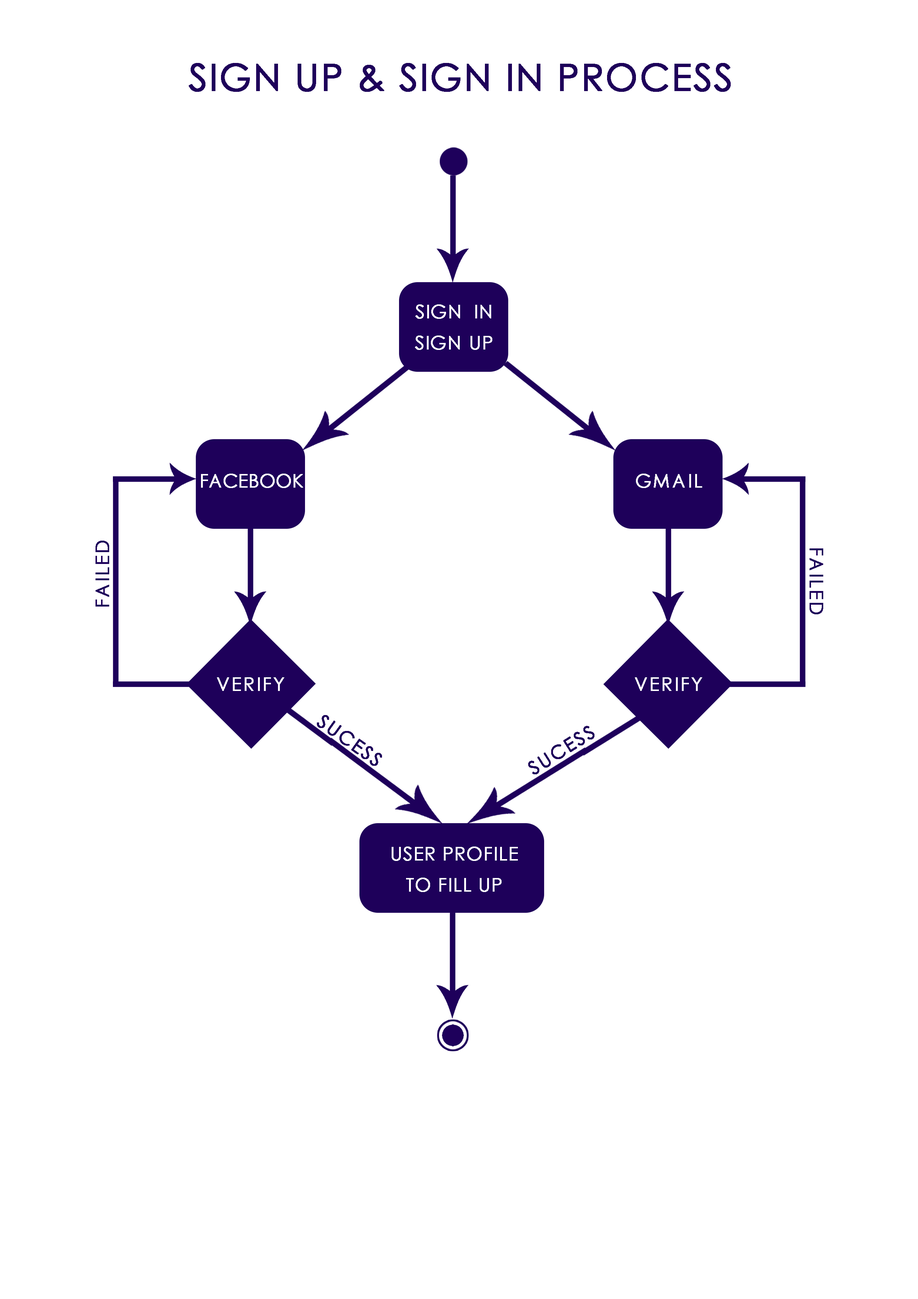
<style>
.page{position:relative;width:918px;height:1299px;background:#ffffff}
.page>*{position:absolute;margin:0}
.t1{font:37px "CenturyGothic";letter-spacing:0.025em;color:#1e005a;text-transform:uppercase;font-weight:bold}
.t2{font:18.5px/30.9px "CenturyGothic";letter-spacing:0.025em;color:#ffffff;text-transform:uppercase;font-weight:bold}
.t3{font:18.5px "CenturyGothic";letter-spacing:-0.01em;color:#ffffff;text-transform:uppercase;font-weight:bold}
.t4{font:18.5px "CenturyGothic";letter-spacing:0.075em;color:#ffffff;text-transform:uppercase;font-weight:bold}
.t5{font:18.5px "CenturyGothic";letter-spacing:0.075em;color:#1e005a;text-transform:uppercase;font-weight:bold}
</style>
<div class="page">
<p class="t1" style="left:189px;top:63px;width:542px;height:29px">sign up &amp; sign in process</p>
<p class="t2" style="left:415px;top:304px;width:77px;height:46px;text-align:justify">sign in<br>sign up</p>
<p class="t3" style="left:201px;top:474px;width:102px;height:14px">facebook</p>
<p class="t4" style="left:636px;top:474px;width:66px;height:14px">gmail</p>
<p class="t5" style="left:96px;top:541px;width:13px;height:65px;rotate:-90deg">failed</p>
<p class="t5" style="left:810px;top:548px;width:13px;height:66px;rotate:90deg">failed</p>
<p class="t4" style="left:217px;top:677px;width:67px;height:14px">Verify</p>
<p class="t4" style="left:635px;top:677px;width:67px;height:14px">Verify</p>
<p class="t5" style="left:317px;top:715px;width:65px;height:51px;rotate:35deg">sucess</p>
<p class="t5" style="left:528px;top:726px;width:67px;height:48px;rotate:-32deg">sucess</p>
<p class="t2" style="left:392px;top:846px;width:126px;height:46px;text-align:justify">user profile<br>to fill up</p>
</div>
